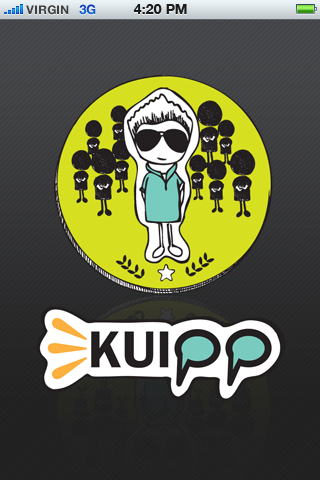
<style>
.page{position:relative;width:320px;height:480px}
.page>*{position:absolute;margin:0}
.t1{font:12px "HelveticaNeue-Bold";color:#404040;text-transform:uppercase}
.t2{font:13px "HelveticaNeue-Bold";color:#0c54c5;text-transform:uppercase}
.t3{font:14px "HelveticaNeue-Bold";color:#1a1b1b;text-transform:uppercase}
</style>
<div class="page">
<p class="t1" style="left:26px;top:5px;width:43px;height:10px">VIRGIN</p>
<p class="t2" style="left:79px;top:4px;width:17px;height:11px">3G</p>
<p class="t3" style="left:133px;top:4px;width:54px;height:10px">4:20 PM</p>
</div>
